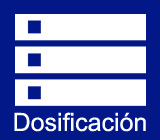
<style>
.page{position:relative;width:160px;height:140px;background:#021888}
.page>*{position:absolute;margin:0}
.t1{font:25px "ArialMT";color:#ffffff}
</style>
<div class="page">
<p class="t1" style="left:14px;top:112px;width:132px;height:20px">Dosificación</p>
</div>
